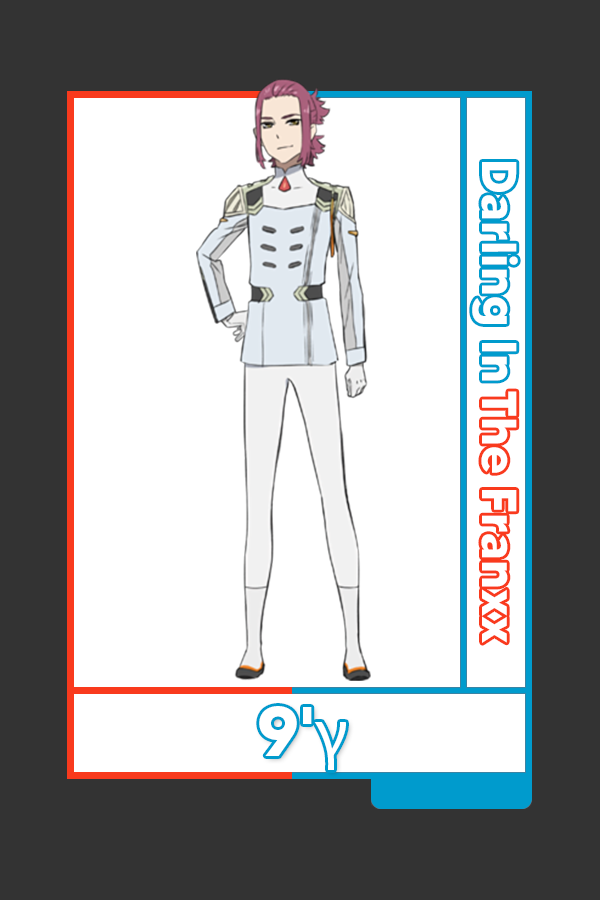
<style>
.page{position:relative;width:600px;height:900px;background:#ffffff}
.page>*{position:absolute;margin:0}
.t1{font:48.8px "MADETOMMY-Bold";color:#ffffff}
.t2{font:70.1px "MADETOMMY-Bold";color:#ffffff}
.t3{font:70.1px "MyriadPro-Regular";color:#ffffff}
</style>
<div class="page">
<p class="t1" style="left:472px;top:162px;width:46px;height:219px;rotate:90deg">Darling In</p>
<p class="t1" style="left:481px;top:391px;width:36px;height:252px;rotate:90deg">The Franxx</p>
<p class="t2" style="left:259px;top:706px;width:87px;height:64px">9'<span class="t3">γ</span></p>
</div>
